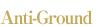
<style>
.page{position:relative;width:108px;height:27px;background:#ffffff}
.page>*{position:absolute;margin:0}
.t1{font:18px "RyuminPro-ExBold";letter-spacing:-0.08em;color:#c4a956}
</style>
<div class="page">
<p class="t1" style="left:0px;top:10px;width:93px;height:15px">Anti-Ground</p>
</div>
